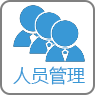
<style>
.page{position:relative;width:95px;height:95px;background:#ffffff}
.page>*{position:absolute;margin:0}
.t1{font:18px "MicrosoftYaHei";color:#3998d6}
</style>
<div class="page">
<p class="t1" style="left:13px;top:66px;width:72px;height:19px">人员管理</p>
</div>
